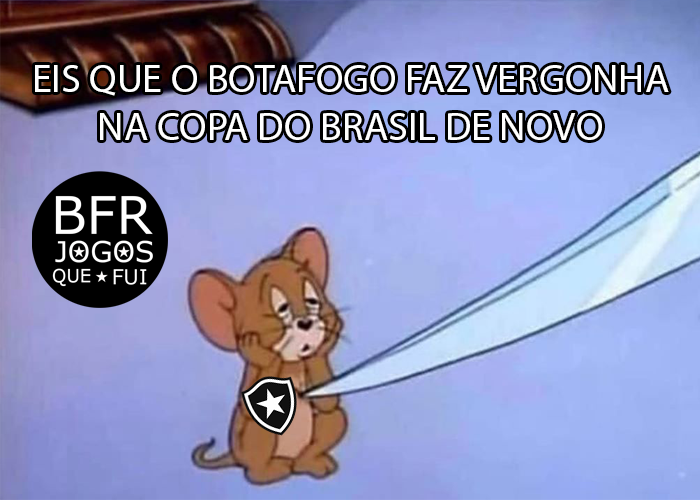
<style>
.page{position:relative;width:700px;height:500px}
.page>*{position:absolute;margin:0}
.t1{font:40px "MyriadPro-Regular";color:#ffffff}
</style>
<div class="page">
<p class="t1" style="left:35px;top:65px;width:634px;height:75px;text-align:center">EIS QUE O BOTAFOGO FAZ VERGONHA NA COPA DO BRASIL DE NOVO</p>
</div>
